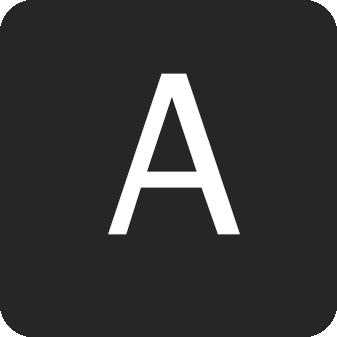
<style>
.page{position:relative;width:337px;height:337px;background:#262626}
.page>*{position:absolute;margin:0}
.t1{font:239.7px "FranklinGothic-Book";letter-spacing:-0.1em;color:#ffffff;font-weight:bold}
</style>
<div class="page">
<p class="t1" style="left:108px;top:73px;width:132px;height:162px">A</p>
</div>
